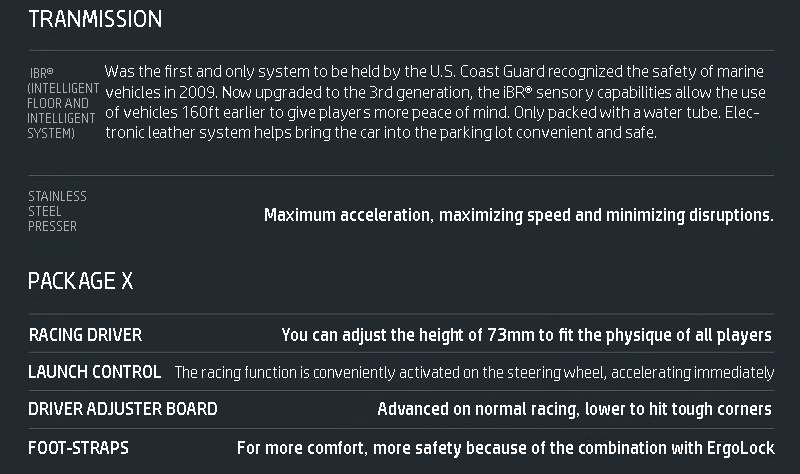
<style>
.page{position:relative;width:800px;height:474px;background:#22292f}
.page>*{position:absolute;margin:0}
.t1{font:24px "HPSimplified-Regular";color:#ffffff}
.t2{font:17px "HPSimplified-Regular";color:#ffffff}
.t3{font:12.5px "HPSimplified-Regular";color:#adadad}
.t4{font:18px "HPSimplified-Regular";color:#ffffff}
.t5{font:16px "HPSimplified-Regular";color:#ffffff}
</style>
<div class="page">
<p class="t1" style="left:29px;top:10px;width:132px;height:17px">TRANMISSION</p>
<p class="t2" style="left:105px;top:65px;width:660px;height:76px">Was the first and only system to be held by the U.S. Coast Guard recognized the safety of marine vehicles in 2009. Now upgraded to the 3rd generation, the iBR® sensory capabilities allow the use of vehicles 160ft earlier to give players more peace of mind. Only packed with a water tube. Electronic leather system helps bring the car into the parking lot convenient and safe.</p>
<p class="t3" style="left:28px;top:68px;width:71px;height:71px">IBR® <br>(INTELLIGENT FLOOR AND INTELLIGENT SYSTEM)</p>
<p class="t3" style="left:29px;top:191px;width:57px;height:40px">STAINLESS STEEL PRESSER</p>
<p class="t4" style="left:265px;top:208px;width:508px;height:17px">Maximum acceleration, maximizing speed and minimizing disruptions.</p>
<p class="t1" style="left:29px;top:272px;width:104px;height:17px">PACKAGE X</p>
<p class="t4" style="left:30px;top:328px;width:741px;height:17px">RACING DRIVER                                   You can adjust the height of 73mm to fit the physique of all players</p>
<p class="t5" style="left:29px;top:365px;width:745px;height:16px"><span class="t4">LAUNCH CONTROL   </span>The racing function is conveniently activated on the steering wheel, accelerating immediately</p>
<p class="t4" style="left:29px;top:402px;width:742px;height:17px">DRIVER ADJUSTER BOARD                                        Advanced on normal racing, lower to hit tough corners</p>
<p class="t4" style="left:29px;top:441px;width:746px;height:17px">FOOT-STRAPS                           For more comfort, more safety because of the combination with ErgoLock</p>
</div>
